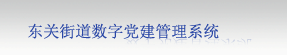
<style>
.page{position:relative;width:287px;height:55px}
.page>*{position:absolute;margin:0}
.t1{font:16px "SimSun";color:#2a47a6}
</style>
<div class="page">
<p class="t1" style="left:28px;top:23px;width:191px;height:16px">东关街道数字党建管理系统</p>
</div>
